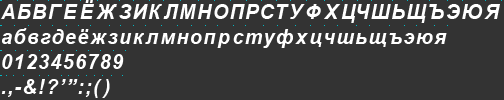
<style>
.page{position:relative;width:504px;height:100px;background:#333333}
.page>*{position:absolute;margin:0}
.t1{font:20px/25px "Arial-BoldItalicMT";letter-spacing:0.06em;color:#ffffff}
.t2{font:20px/25px "Arial-BoldItalicMT";letter-spacing:0.16em;color:#ffffff}
.t3{font:20px/25px "Arial-BoldItalicMT";letter-spacing:0.18em;color:#ffffff}
.t4{font:20px/25px "Arial-BoldItalicMT";letter-spacing:0.065em;color:#ffffff}
.t5{font:20px/25px "Arial-BoldItalicMT";letter-spacing:0.1em;color:#ffffff}
.t6{font:20px/25px "Arial-BoldItalicMT";letter-spacing:0.185em;color:#ffffff}
.t7{font:20px/25px "Arial-BoldItalicMT";letter-spacing:0.165em;color:#ffffff}
.t8{font:20px/25px "Arial-BoldItalicMT";letter-spacing:-0.035em;color:#ffffff}
.t9{font:20px/25px "Arial-BoldItalicMT";letter-spacing:0.045em;color:#ffffff}
.t10{font:20px/25px "Arial-BoldItalicMT";letter-spacing:0.12em;color:#ffffff}
.t11{font:20px/25px "Arial-BoldItalicMT";letter-spacing:0.08em;color:#ffffff}
.t12{font:20px/25px "Arial-BoldItalicMT";letter-spacing:0.2em;color:#ffffff}
</style>
<div class="page">
<p class="t1" style="left:1px;top:0px;width:499px;height:98px">АБВ<span class="t2">ГЕ</span><span class="t3">ЁЖ</span>ЗИ<span class="t3">К</span><span class="t4">ЛМ</span>НОПРС<span class="t5">Т</span><span class="t6">УФ</span><span class="t7">Х</span><span class="t8">Ц</span><span class="t4">ЧШ</span><span class="t9">Ь</span>ЩЪЭ<span class="t10">ЮЯ<br></span>абвгде<span class="t10">ёж</span>зи<span class="t10">кл</span>мно<span class="t10">пр</span>сту<span class="t10">фх</span>цчшьщъэ<span class="t11">юя<br></span>0123456789<br>.,-&amp;!?’”:;<span class="t12">()</span></p>
</div>
